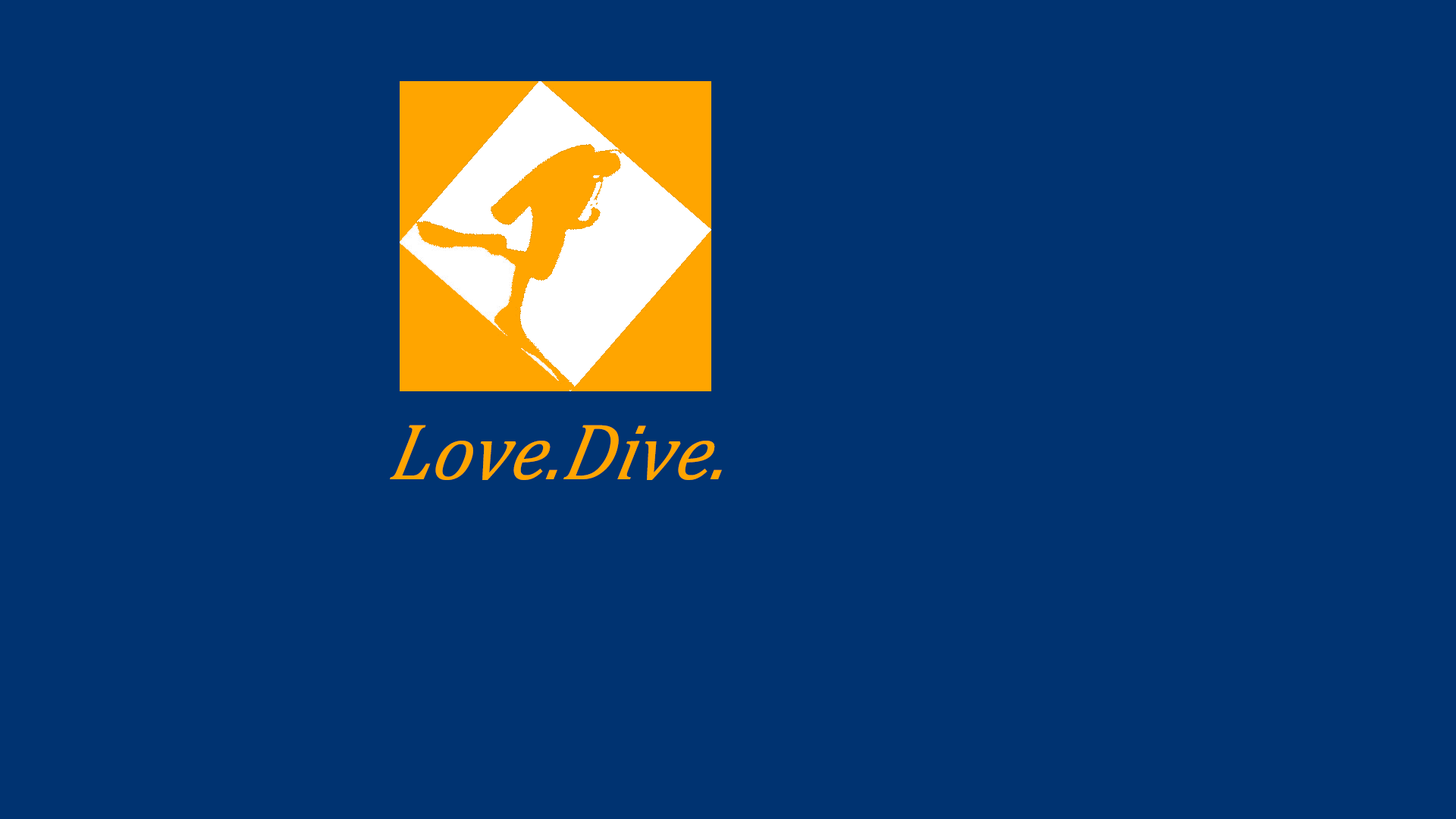
<style>
.page{position:relative;width:1456px;height:819px;background:#003371}
.page>*{position:absolute;margin:0}
.t1{font:80.9px "Cambria-Italic";color:#ffa500;font-style:italic}
</style>
<div class="page">
<p class="t1" style="left:390px;top:425px;width:332px;height:55px">Love.Dive.</p>
</div>
